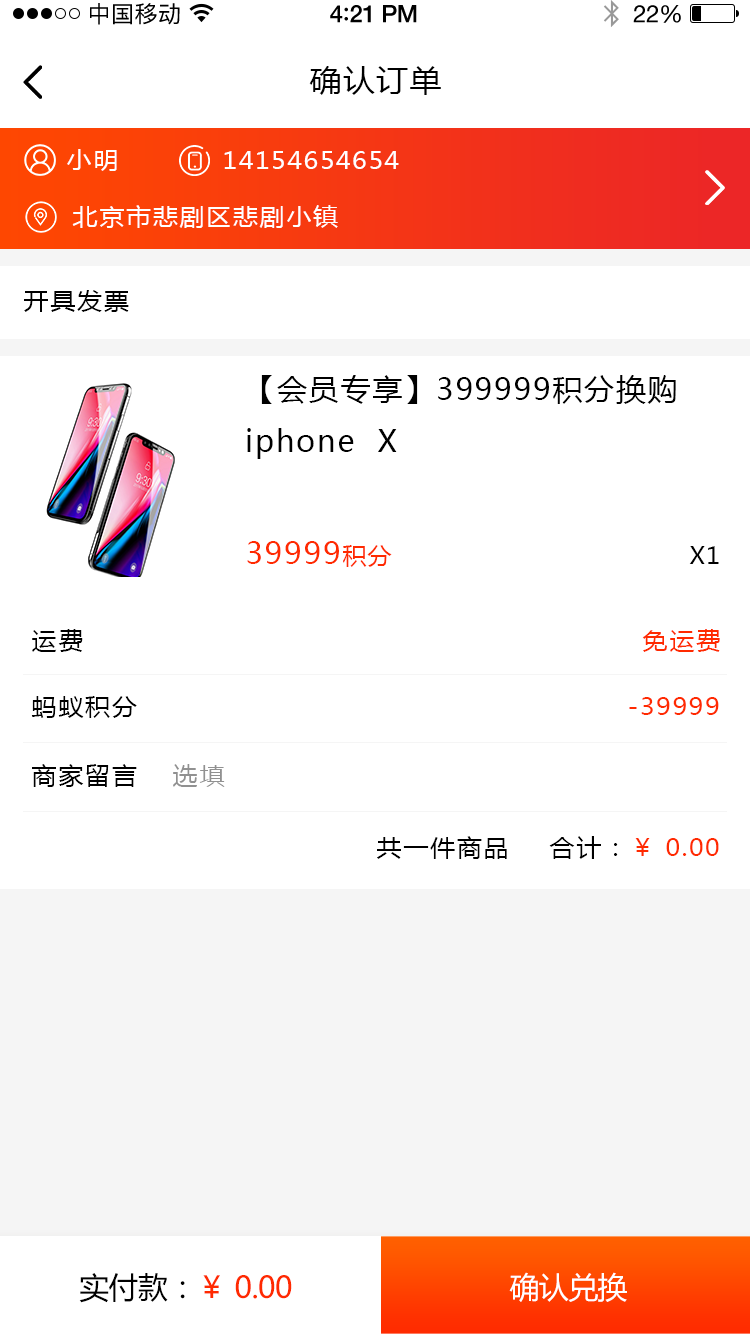
<style>
.page{position:relative;width:750px;height:1334px;background:#ffffff}
.page>*{position:absolute;margin:0}
.t1{font:23px "PingFangSC-Regular";letter-spacing:0.02em;color:#000000}
.t2{font:24px "HelveticaNeue-Medium";letter-spacing:-0.02em;color:#000000}
.t3{font:26px "Avenir-Medium";letter-spacing:-0.02em;color:#000000}
.t4{font:24px "HelveticaNeue";letter-spacing:-0.02em;color:#000000}
.t5{font:30px "MicrosoftYaHei";letter-spacing:0.05em;color:#000000;scale:1.06 1}
.t6{font:24px "MicrosoftYaHei";letter-spacing:0.05em;color:#ffffff;scale:1.06 1}
.t7{font:24px "MicrosoftYaHei";letter-spacing:0.05em;color:#000000;scale:1.06 1}
.t8{font:30px "MicrosoftYaHei";letter-spacing:0.06em;color:#000000}
.t9{font:30px "MicrosoftYaHei";letter-spacing:0.06em;color:#ff2a00;text-transform:uppercase}
.t10{font:24px "MicrosoftYaHei";letter-spacing:0.06em;color:#ff2a00;text-transform:uppercase}
.t11{font:24px "MicrosoftYaHei";letter-spacing:0.06em;color:#000000;text-transform:uppercase}
.t12{font:24px "MicrosoftYaHei";letter-spacing:0.05em;color:#ff2a00;scale:1.06 1}
.t13{font:24px "MicrosoftYaHei";letter-spacing:0.05em;color:#919191;scale:1.06 1}
.t14{font:30px "MicrosoftYaHei";letter-spacing:-0.02em;color:#ff2a00}
.t15{font:30px "MicrosoftYaHei";letter-spacing:-0.02em;color:#000000}
.t16{font:30px "MicrosoftYaHei";letter-spacing:-0.02em;color:#ffffff}
</style>
<div class="page">
<p class="t1" style="left:90px;top:3px;width:90px;height:22px">中国移动</p>
<p class="t2" style="left:330px;top:5px;width:87px;height:18px">4<span class="t3">:</span>21 PM</p>
<p class="t4" style="left:633px;top:5px;width:48px;height:18px">22%</p>
<p class="t5" style="left:309px;top:66px;width:132px;height:29px">确认订单</p>
<p class="t6" style="left:67px;top:149px;width:50px;height:22px">小明</p>
<p class="t6" style="left:224px;top:151px;width:175px;height:18px">14154654654</p>
<p class="t6" style="left:72px;top:205px;width:266px;height:23px">北京市悲剧区悲剧小镇</p>
<p class="t7" style="left:24px;top:290px;width:105px;height:22px">开具发票</p>
<p class="t8" style="left:247px;top:375px;width:429px;height:84px">【会员专享】399999积分换购iphone  X</p>
<p class="t9" style="left:247px;top:541px;width:145px;height:26px">39999<span class="t10">积分</span></p>
<p class="t11" style="left:689px;top:546px;width:30px;height:18px">x1</p>
<p class="t7" style="left:32px;top:629px;width:51px;height:23px">运费</p>
<p class="t12" style="left:642px;top:629px;width:78px;height:23px">免运费</p>
<p class="t7" style="left:31px;top:696px;width:106px;height:22px">蚂蚁积分</p>
<p class="t12" style="left:629px;top:697px;width:90px;height:18px">-39999</p>
<p class="t7" style="left:32px;top:764px;width:105px;height:23px">商家留言</p>
<p class="t13" style="left:173px;top:764px;width:52px;height:23px">选填</p>
<p class="t7" style="left:377px;top:836px;width:130px;height:23px">共一件商品</p>
<p class="t12" style="left:549px;top:836px;width:170px;height:23px"><span class="t7">合计：</span>￥ 0.00</p>
<p class="t14" style="left:79px;top:1273px;width:213px;height:30px"><span class="t15">实付款：</span>￥ 0.00</p>
<p class="t16" style="left:509px;top:1272px;width:118px;height:30px">确认兑换</p>
</div>
